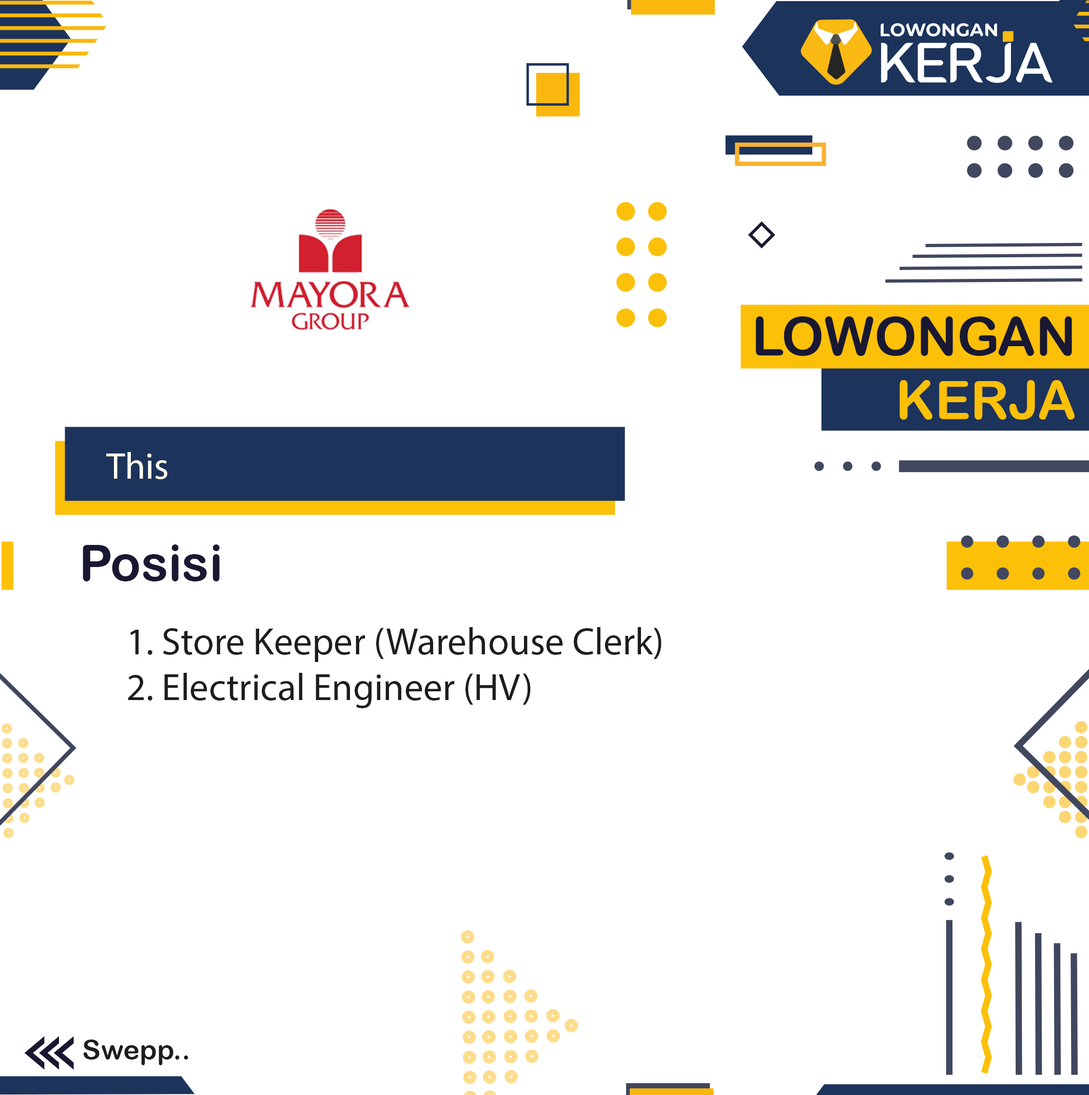
<style>
.page{position:relative;width:1089px;height:1095px;background:#ffffff}
.page>*{position:absolute;margin:0}
.t1{font:37.4px "MyriadPro-Regular";color:#ffffed}
.t2{font:50.4px "ArialRoundedMTBold";color:#191832}
.t3{font:38.2px "MyriadPro-Regular";color:#1d1d1b}
.t4{font:28px "ArialRoundedMTBold";color:#1d1d1b}
</style>
<div class="page">
<p class="t1" style="left:106px;top:452px;width:61px;height:27px">This</p>
<p class="t2" style="left:83px;top:544px;width:137px;height:37px">Posisi</p>
<p class="t3" style="left:128px;top:627px;width:534px;height:81px">1. Store Keeper (Warehouse Clerk)<br>2. Electrical Engineer (HV)</p>
<p class="t4" style="left:83px;top:1039px;width:105px;height:26px">Swepp..</p>
</div>
